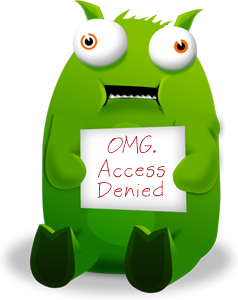
<style>
.page{position:relative;width:238px;height:300px;background:#ffffff}
.page>*{position:absolute;margin:0}
.t1{font:30.3px/23.6px "ForeverFriends";color:#b71719;scale:1.1 1}
.t2{font:30.3px/2.2px "ForeverFriends";color:#b71719;scale:1.1 1}
.t3{font:30.3px "ForeverFriends";color:#b71719;scale:1.1 1}
.t4{font:30.3px/20.6px "ForeverFriends";color:#b71719;scale:1.1 1}
</style>
<div class="page">
<p class="t1" style="left:97px;top:135px;width:68px;height:63px;text-align:center"><span class="t2">OMG</span><span class="t3">.<br></span>Access<br><span class="t4">Denied</span></p>
</div>
